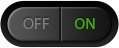
<style>
.page{position:relative;width:119px;height:48px}
.page>*{position:absolute;margin:0}
.t1{font:16px "MyriadPro-Regular";color:#818181}
.t2{font:16px "MyriadPro-Regular";color:#49ae0c}
</style>
<div class="page">
<p class="t1" style="left:23px;top:18px;width:26px;height:11px">OFF</p>
<p class="t2" style="left:75px;top:18px;width:20px;height:11px">ON</p>
</div>
